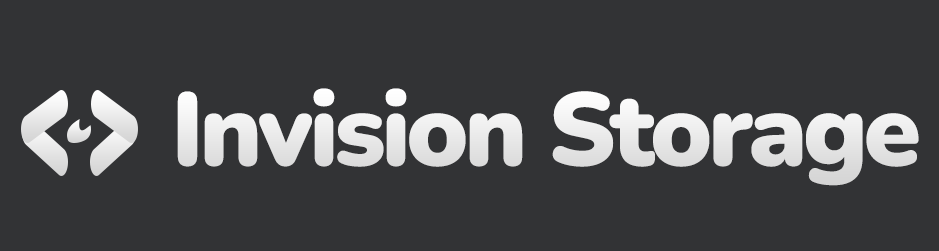
<style>
.page{position:relative;width:939px;height:251px;background:#323335}
.page>*{position:absolute;margin:0}
.t1{font:103.4px "Nunito-Black";letter-spacing:-0.04em;color:#e9e9e9}
</style>
<div class="page">
<p class="t1" style="left:177px;top:88px;width:742px;height:98px">Invision Storage</p>
</div>
